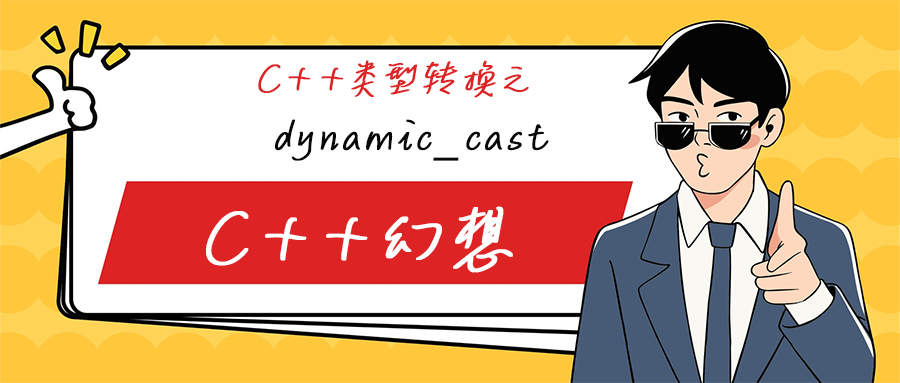
<style>
.page{position:relative;width:900px;height:383px;background:#ffffff}
.page>*{position:absolute;margin:0}
.t1{font:42.4px "MLingWaiMedium-SC";letter-spacing:0.1em;color:#dd2324;font-weight:bold;font-style:italic}
.t2{font:45.2px "MLingWaiMedium-SC";letter-spacing:0.1em;color:#090808;font-weight:bold;font-style:italic}
.t3{font:80px "MLingWaiMedium-SC";letter-spacing:0.1em;color:#ffffff;font-weight:bold;font-style:italic}
</style>
<div class="page">
<p class="t1" style="left:258px;top:60px;width:271px;height:38px">C++类型转换之</p>
<p class="t2" style="left:275px;top:119px;width:274px;height:42px">dynamic_cast</p>
<p class="t3" style="left:206px;top:206px;width:307px;height:67px">C++幻想</p>
</div>
